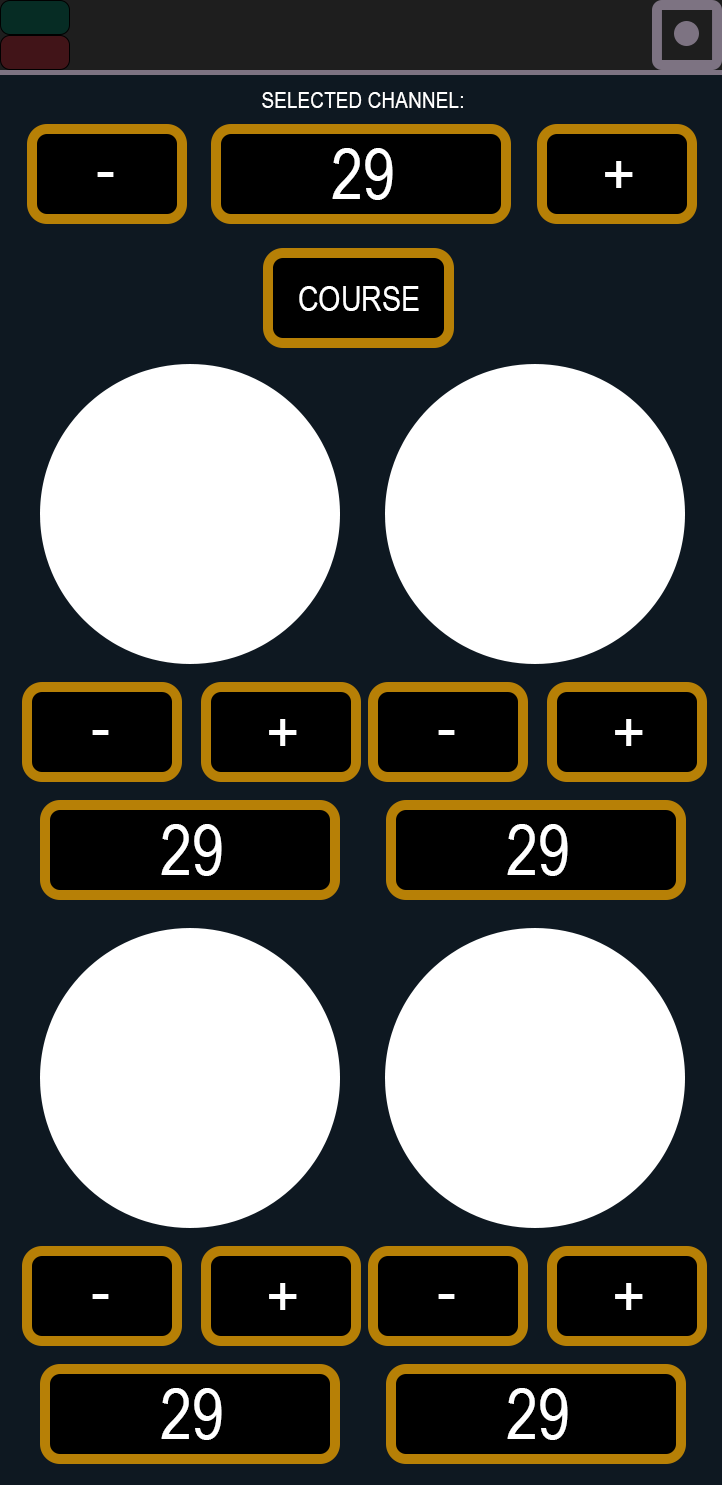
<style>
.page{position:relative;width:722px;height:1485px;background:#0e1821}
.page>*{position:absolute;margin:0}
.t1{font:23.3px "ArialNarrow";color:#ffffff}
.t2{font:70px "ArialNarrow";color:#ffffff}
.t3{font:35px "ArialNarrow";color:#ffffff}
</style>
<div class="page">
<p class="t1" style="left:262px;top:92px;width:201px;height:16px">SELECTED CHANNEL:</p>
<p class="t2" style="left:332px;top:148px;width:61px;height:52px">29</p>
<p class="t2" style="left:605px;top:161px;width:28px;height:27px">+</p>
<p class="t2" style="left:97px;top:172px;width:17px;height:5px">-</p>
<p class="t3" style="left:299px;top:286px;width:120px;height:25px">COURSE</p>
<p class="t2" style="left:269px;top:719px;width:28px;height:27px">+</p>
<p class="t2" style="left:615px;top:719px;width:28px;height:27px">+</p>
<p class="t2" style="left:92px;top:730px;width:17px;height:5px">-</p>
<p class="t2" style="left:438px;top:730px;width:17px;height:5px">-</p>
<p class="t2" style="left:161px;top:824px;width:61px;height:52px">29</p>
<p class="t2" style="left:507px;top:824px;width:61px;height:52px">29</p>
<p class="t2" style="left:269px;top:1283px;width:28px;height:27px">+</p>
<p class="t2" style="left:615px;top:1283px;width:28px;height:27px">+</p>
<p class="t2" style="left:92px;top:1294px;width:17px;height:5px">-</p>
<p class="t2" style="left:438px;top:1294px;width:17px;height:5px">-</p>
<p class="t2" style="left:161px;top:1388px;width:61px;height:52px">29</p>
<p class="t2" style="left:507px;top:1388px;width:61px;height:52px">29</p>
</div>
